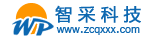
<style>
.page{position:relative;width:156px;height:39px;background:#ffffff}
.page>*{position:absolute;margin:0}
.t1{font:17.3px "MicrosoftYaHei";letter-spacing:0.3em;color:#0c67b0;font-weight:bold}
.t2{font:16.6px "Magneto-Bold";color:#0c67b0}
.t3{font:12px "Vrinda";letter-spacing:-0.01em;color:#0c67b0}
</style>
<div class="page">
<p class="t1" style="left:55px;top:5px;width:86px;height:18px">智采科技</p>
<p class="t2" style="left:12px;top:18px;width:42px;height:18px">WP</p>
<p class="t3" style="left:56px;top:27px;width:84px;height:8px">www.zcqxxx.com</p>
</div>
